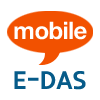
<style>
.page{position:relative;width:100px;height:100px;background:#ffffff}
.page>*{position:absolute;margin:0}
.t1{font:24px "Helvetica75-Bold";letter-spacing:-0.025em;color:#ffffff}
.t2{font:23.4px "EBSFont-B";color:#065b89;font-weight:bold;scale:1.11 1}
</style>
<div class="page">
<p class="t1" style="left:14px;top:21px;width:73px;height:19px">mobile</p>
<p class="t2" style="left:14px;top:71px;width:72px;height:19px">E-DAS</p>
</div>
